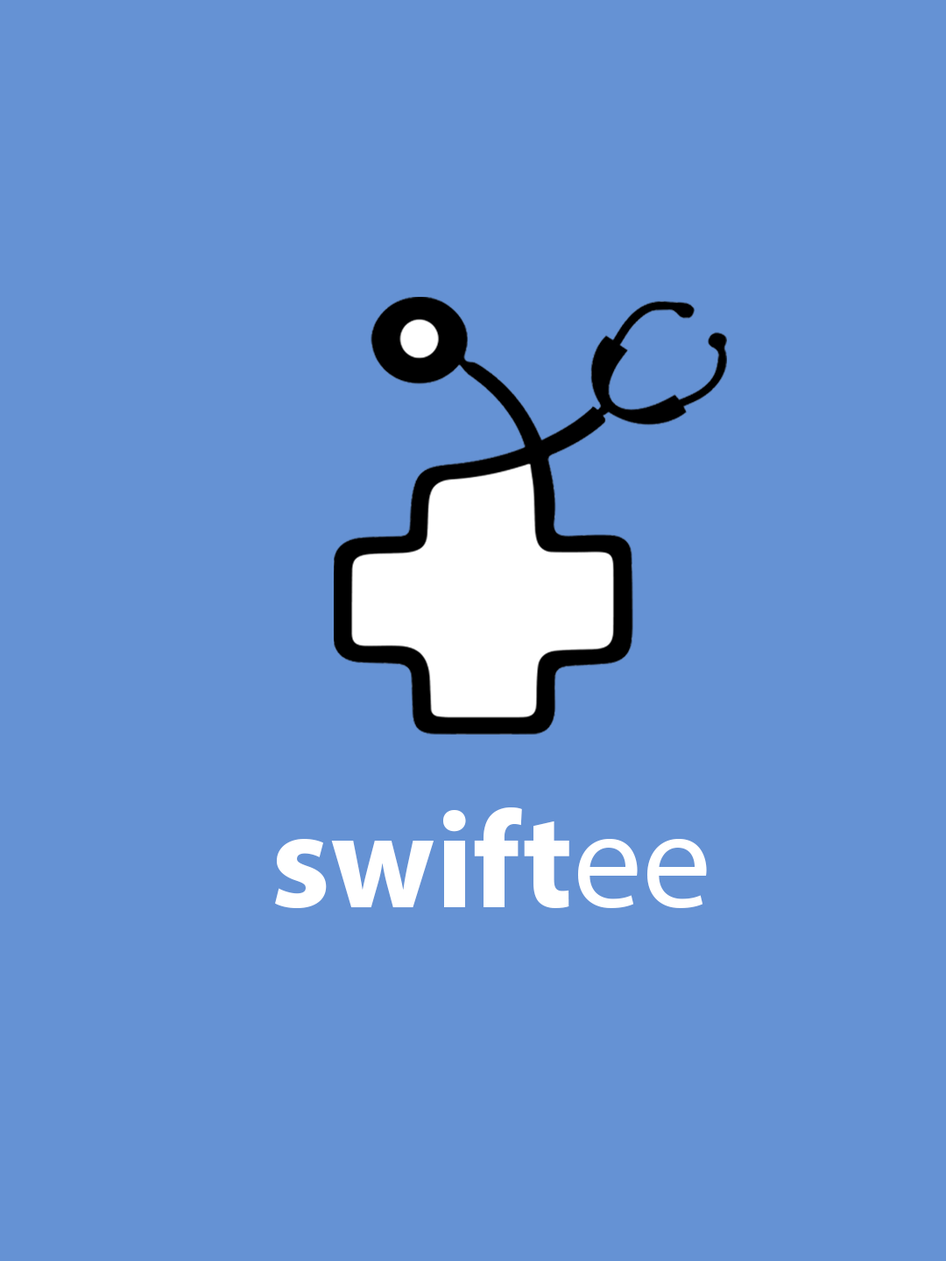
<style>
.page{position:relative;width:946px;height:1261px;background:#6592d4}
.page>*{position:absolute;margin:0}
.t1{font:138.1px "MyriadPro-Bold";color:#ffffff}
.t2{font:138.1px "MyriadPro-Regular";color:#ffffff}
</style>
<div class="page">
<p class="t1" style="left:275px;top:807px;width:432px;height:102px">swift<span class="t2">ee</span></p>
</div>
